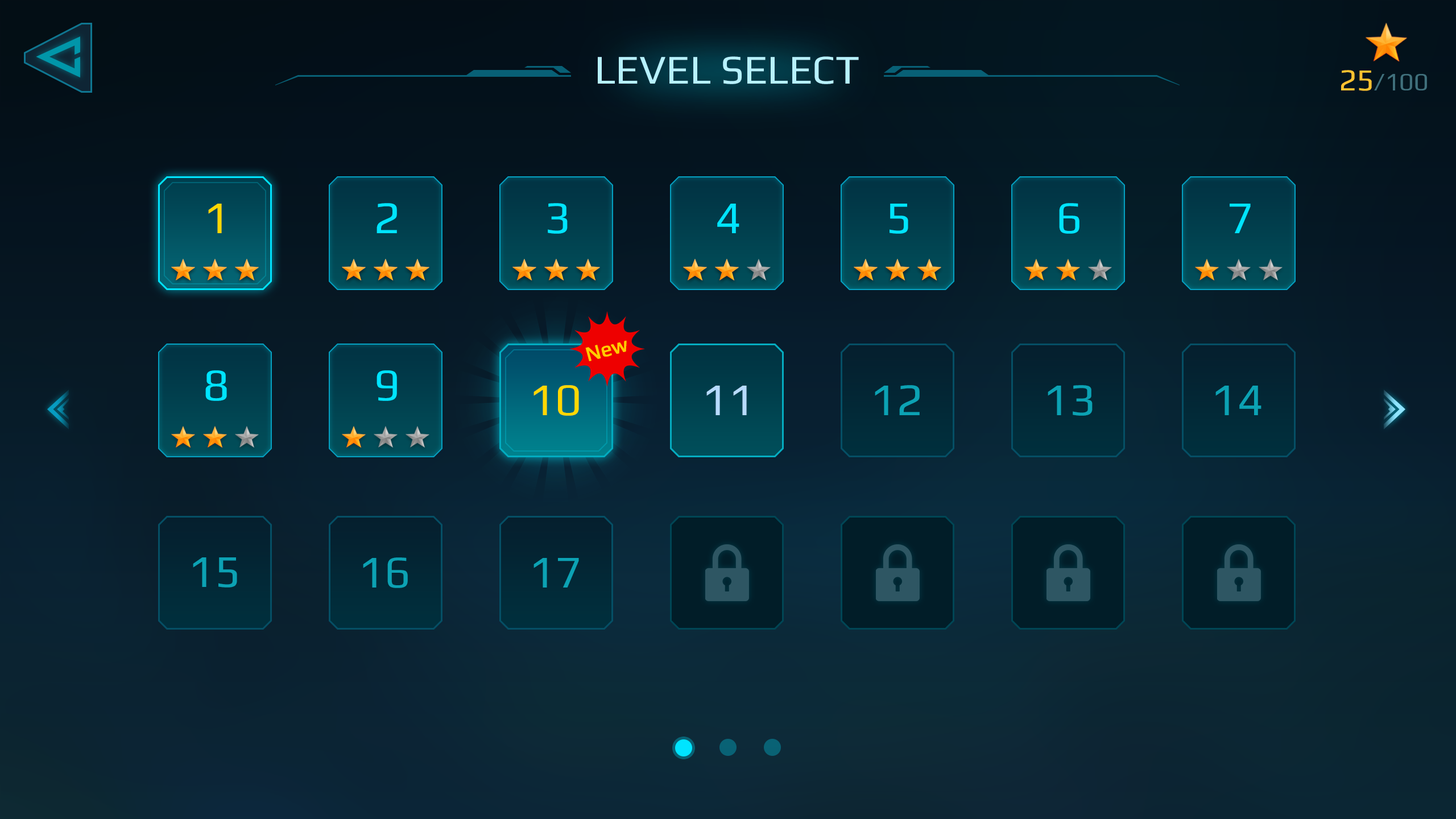
<style>
.page{position:relative;width:1456px;height:819px}
.page>*{position:absolute;margin:0}
.t1{font:40.9px "Play-Regular";color:#b7f1ff}
.t2{font:25px "Play-Regular";color:#40707c}
.t3{font:30.7px "Play-Regular";color:#ffc230}
.t4{font:45.5px "Play-Regular";color:#ffd800}
.t5{font:45.5px "Play-Regular";color:#00e4ff}
.t6{font:20.5px "Play-Regular";color:#ffcc00;font-weight:bold}
.t7{font:45.5px "Play-Regular";color:#b7dbff}
.t8{font:45.5px "Play-Regular";color:#0ca2b4}
</style>
<div class="page">
<p class="t1" style="left:598px;top:56px;width:261px;height:28px">LEVEL SELECT</p>
<p class="t2" style="left:1341px;top:70px;width:86px;height:21px"><span class="t3">25</span>/100</p>
<p class="t4" style="left:208px;top:204px;width:14px;height:29px">1</p>
<p class="t5" style="left:377px;top:203px;width:20px;height:30px">2</p>
<p class="t5" style="left:548px;top:203px;width:20px;height:31px">3</p>
<p class="t5" style="left:717px;top:204px;width:22px;height:29px">4</p>
<p class="t5" style="left:890px;top:204px;width:18px;height:30px">5</p>
<p class="t5" style="left:1059px;top:203px;width:20px;height:31px">6</p>
<p class="t5" style="left:1230px;top:204px;width:21px;height:29px">7</p>
<p class="t6" style="left:585px;top:341px;width:42px;height:20px;rotate:-15deg">New</p>
<p class="t5" style="left:205px;top:370px;width:22px;height:31px">8</p>
<p class="t5" style="left:377px;top:370px;width:20px;height:31px">9</p>
<p class="t4" style="left:533px;top:385px;width:46px;height:31px">10</p>
<p class="t7" style="left:706px;top:386px;width:41px;height:29px">11</p>
<p class="t7" style="left:706px;top:386px;width:41px;height:29px">11</p>
<p class="t8" style="left:875px;top:385px;width:45px;height:30px">12</p>
<p class="t8" style="left:1048px;top:385px;width:45px;height:31px">13</p>
<p class="t8" style="left:1215px;top:386px;width:46px;height:29px">14</p>
<p class="t8" style="left:193px;top:557px;width:44px;height:31px">15</p>
<p class="t8" style="left:363px;top:557px;width:45px;height:31px">16</p>
<p class="t8" style="left:533px;top:558px;width:46px;height:30px">17</p>
</div>
